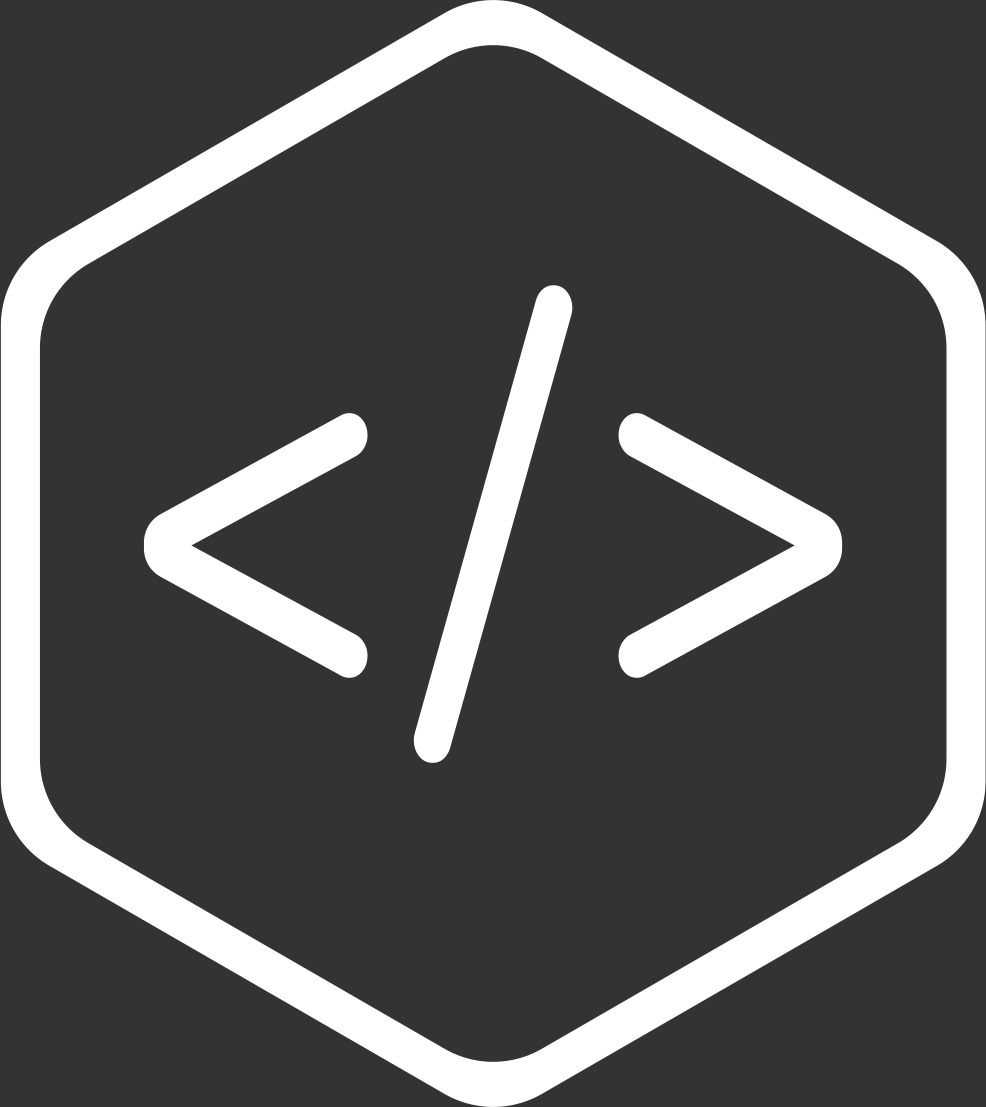
<style>
.page{position:relative;width:986px;height:1107px;background:#333333}
.page>*{position:absolute;margin:0}
.t1{font:555.9px "VarelaRound-Regular";color:#ffffff;scale:0.82 1}
</style>
<div class="page">
<p class="t1" style="left:143px;top:285px;width:700px;height:478px">&lt;/&gt;</p>
</div>
